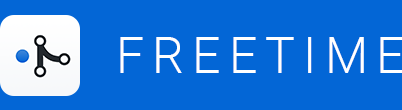
<style>
.page{position:relative;width:402px;height:110px;background:#0366d6}
.page>*{position:absolute;margin:0}
.t1{font:50px "Roboto-Light";letter-spacing:0.16em;color:#ffffff}
</style>
<div class="page">
<p class="t1" style="left:120px;top:37px;width:283px;height:36px">FREETIME</p>
</div>
